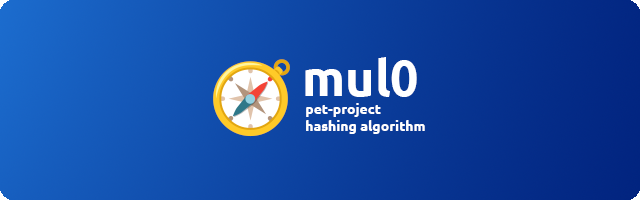
<style>
.page{position:relative;width:640px;height:200px}
.page>*{position:absolute;margin:0}
.t1{font:50px "Ubuntu-Bold";color:#ffffff}
.t2{font:14px "Ubuntu-Bold";color:#ffffff}
</style>
<div class="page">
<p class="t1" style="left:305px;top:57px;width:112px;height:40px">mul0</p>
<p class="t2" style="left:306px;top:103px;width:119px;height:31px">pet-project<br>hashing algorithm</p>
</div>
